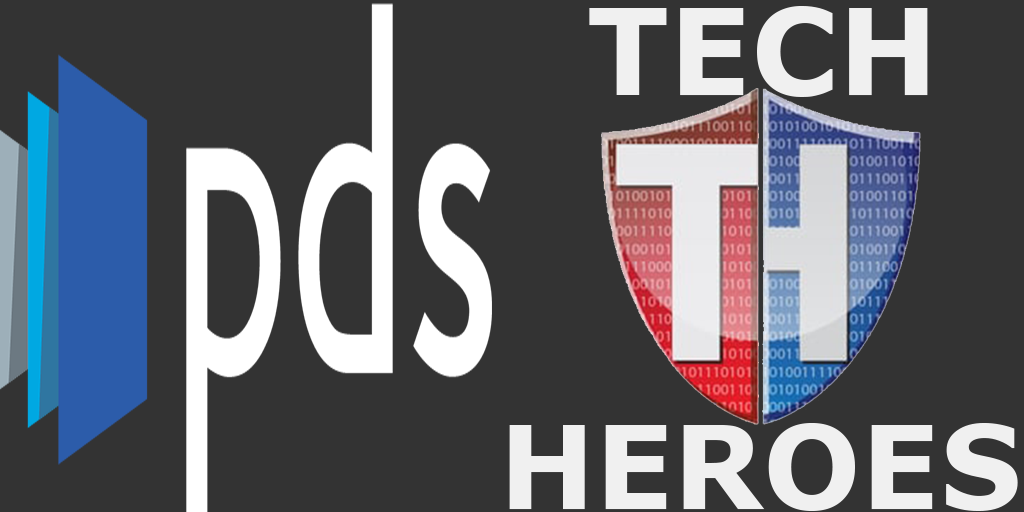
<style>
.page{position:relative;width:1024px;height:512px;background:#333333}
.page>*{position:absolute;margin:0}
.t1{font:120px "Verdana-Bold";color:#f0f0f0}
.t2{font:115px "Verdana-Bold";color:#f0f0f0}
</style>
<div class="page">
<p class="t1" style="left:589px;top:6px;width:339px;height:91px">TECH</p>
<p class="t2" style="left:509px;top:423px;width:509px;height:88px">HEROES</p>
</div>
